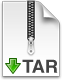
<style>
.page{position:relative;width:62px;height:80px}
.page>*{position:absolute;margin:0}
.t1{font:18px "Helvetica-Bold";color:#444444}
</style>
<div class="page">
<p class="t1" style="left:22px;top:59px;width:36px;height:14px">TAR</p>
</div>
